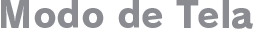
<style>
.page{position:relative;width:254px;height:36px;background:#ffffff}
.page>*{position:absolute;margin:0}
.t1{font:36px "RodinPro-EB";color:#8b8c92}
</style>
<div class="page">
<p class="t1" style="left:1px;top:0px;width:252px;height:29px">Modo de Tela</p>
</div>
